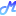
<style>
.page{position:relative;width:16px;height:16px;background:#ffffff}
.page>*{position:absolute;margin:0}
.t1{font:16px "HarlowSolid"}
</style>
<div class="page">
<p class="t1" style="left:0px;top:1px;width:17px;height:14px">M</p>
</div>
